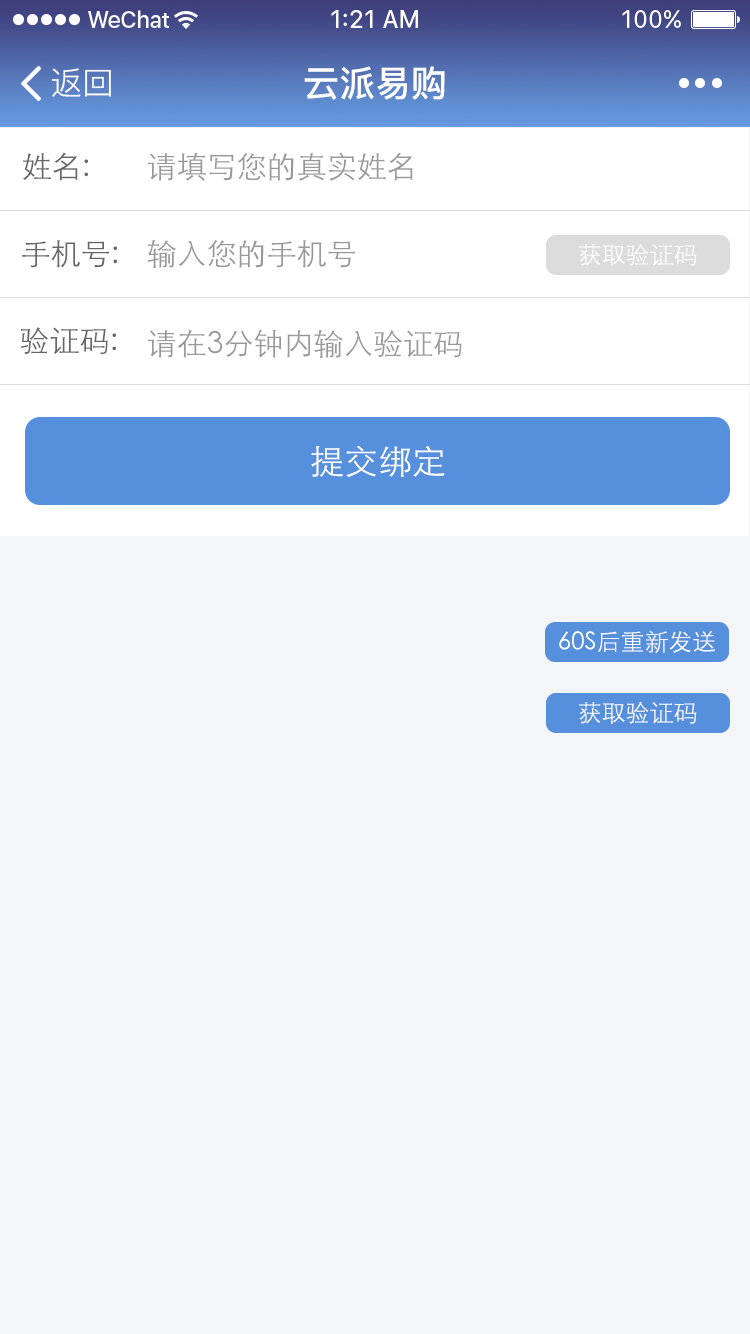
<style>
.page{position:relative;width:750px;height:1334px;background:#f4f5f6}
.page>*{position:absolute;margin:0}
.t1{font:32px "PingFang-SC-Regular";color:#ffffff}
.t2{font:36px "PingFang-SC-Bold";color:#ffffff}
.t3{font:30px "STXihei";color:#666666}
.t4{font:30px "STXihei";color:#999999}
.t5{font:24px "STXihei";color:#ffffff}
.t6{font:34px "STXihei";color:#ffffff}
</style>
<div class="page">
<p class="t1" style="left:52px;top:68px;width:59px;height:29px">返回</p>
<p class="t2" style="left:304px;top:66px;width:141px;height:34px">云派易购</p>
<p class="t3" style="left:23px;top:152px;width:65px;height:29px">姓名:</p>
<p class="t4" style="left:148px;top:152px;width:265px;height:29px">请填写您的真实姓名</p>
<p class="t3" style="left:22px;top:240px;width:95px;height:28px">手机号:</p>
<p class="t4" style="left:147px;top:239px;width:208px;height:29px">输入您的手机号</p>
<p class="t5" style="left:579px;top:244px;width:118px;height:22px">获取验证码</p>
<p class="t3" style="left:20px;top:327px;width:96px;height:28px">验证码:</p>
<p class="t4" style="left:148px;top:329px;width:314px;height:29px">请在3分钟内输入验证码</p>
<p class="t6" style="left:311px;top:445px;width:134px;height:33px">提交绑定</p>
<p class="t5" style="left:559px;top:630px;width:156px;height:23px">60S后重新发送</p>
<p class="t5" style="left:579px;top:702px;width:118px;height:22px">获取验证码</p>
</div>
